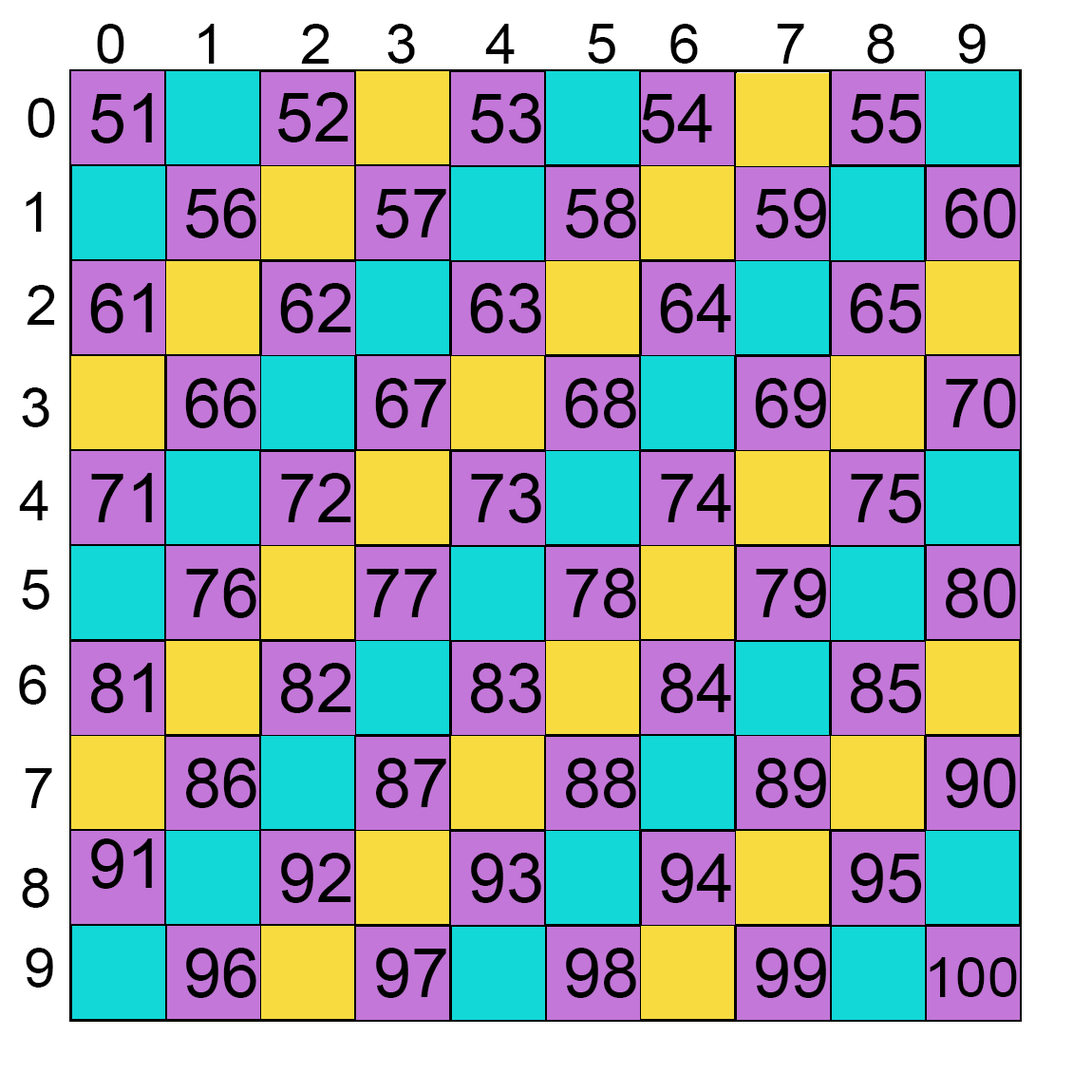
<style>
.page{position:relative;width:1092px;height:1092px;background:#c377d8}
.page>*{position:absolute;margin:0}
.t1{font:57px "ArialMT";color:#000000}
.t2{font:68.4px "ArialMT";color:#000000}
</style>
<div class="page">
<p class="t1" style="left:97px;top:24px;width:27px;height:40px">0</p>
<p class="t1" style="left:198px;top:24px;width:17px;height:40px">1</p>
<p class="t1" style="left:301px;top:24px;width:28px;height:40px">2</p>
<p class="t1" style="left:387px;top:24px;width:28px;height:40px">3</p>
<p class="t1" style="left:485px;top:24px;width:30px;height:40px">4</p>
<p class="t1" style="left:588px;top:24px;width:27px;height:40px">5</p>
<p class="t1" style="left:670px;top:24px;width:28px;height:40px">6</p>
<p class="t1" style="left:777px;top:24px;width:27px;height:40px">7</p>
<p class="t1" style="left:867px;top:24px;width:27px;height:40px">8</p>
<p class="t1" style="left:958px;top:24px;width:28px;height:40px">9</p>
<p class="t1" style="left:28px;top:98px;width:27px;height:40px">0</p>
<p class="t2" style="left:91px;top:93px;width:61px;height:50px">51</p>
<p class="t2" style="left:278px;top:92px;width:70px;height:50px">52</p>
<p class="t2" style="left:471px;top:93px;width:70px;height:50px">53</p>
<p class="t2" style="left:642px;top:94px;width:70px;height:49px">54</p>
<p class="t2" style="left:851px;top:94px;width:71px;height:49px">55</p>
<p class="t1" style="left:26px;top:192px;width:16px;height:40px">1</p>
<p class="t2" style="left:186px;top:188px;width:70px;height:50px">56</p>
<p class="t2" style="left:376px;top:189px;width:70px;height:49px">57</p>
<p class="t2" style="left:566px;top:188px;width:70px;height:50px">58</p>
<p class="t2" style="left:756px;top:188px;width:70px;height:50px">59</p>
<p class="t2" style="left:945px;top:188px;width:71px;height:50px">60</p>
<p class="t1" style="left:27px;top:285px;width:28px;height:40px">2</p>
<p class="t2" style="left:90px;top:283px;width:62px;height:50px">61</p>
<p class="t2" style="left:280px;top:283px;width:71px;height:50px">62</p>
<p class="t2" style="left:470px;top:283px;width:71px;height:50px">63</p>
<p class="t2" style="left:660px;top:283px;width:71px;height:50px">64</p>
<p class="t2" style="left:850px;top:283px;width:72px;height:50px">65</p>
<p class="t2" style="left:185px;top:378px;width:71px;height:50px">66</p>
<p class="t2" style="left:375px;top:378px;width:71px;height:50px">67</p>
<p class="t2" style="left:565px;top:378px;width:71px;height:50px">68</p>
<p class="t2" style="left:755px;top:378px;width:71px;height:50px">69</p>
<p class="t2" style="left:946px;top:378px;width:70px;height:50px">70</p>
<p class="t1" style="left:22px;top:387px;width:27px;height:40px">3</p>
<p class="t2" style="left:91px;top:473px;width:61px;height:49px">71</p>
<p class="t2" style="left:281px;top:473px;width:70px;height:49px">72</p>
<p class="t2" style="left:471px;top:473px;width:70px;height:50px">73</p>
<p class="t2" style="left:661px;top:474px;width:70px;height:48px">74</p>
<p class="t2" style="left:851px;top:474px;width:71px;height:49px">75</p>
<p class="t1" style="left:19px;top:480px;width:29px;height:40px">4</p>
<p class="t1" style="left:22px;top:570px;width:27px;height:40px">5</p>
<p class="t2" style="left:186px;top:568px;width:70px;height:50px">76</p>
<p class="t2" style="left:367px;top:569px;width:70px;height:48px">77</p>
<p class="t2" style="left:566px;top:568px;width:70px;height:50px">78</p>
<p class="t2" style="left:756px;top:568px;width:70px;height:50px">79</p>
<p class="t2" style="left:946px;top:568px;width:70px;height:50px">80</p>
<p class="t1" style="left:19px;top:665px;width:28px;height:40px">6</p>
<p class="t2" style="left:91px;top:663px;width:61px;height:50px">81</p>
<p class="t2" style="left:281px;top:663px;width:70px;height:50px">82</p>
<p class="t2" style="left:471px;top:663px;width:70px;height:50px">83</p>
<p class="t2" style="left:661px;top:663px;width:70px;height:50px">84</p>
<p class="t2" style="left:851px;top:663px;width:71px;height:50px">85</p>
<p class="t2" style="left:186px;top:758px;width:70px;height:50px">86</p>
<p class="t2" style="left:376px;top:758px;width:70px;height:50px">87</p>
<p class="t2" style="left:566px;top:758px;width:70px;height:50px">88</p>
<p class="t2" style="left:756px;top:758px;width:70px;height:50px">89</p>
<p class="t2" style="left:946px;top:758px;width:70px;height:50px">90</p>
<p class="t1" style="left:25px;top:768px;width:27px;height:40px">7</p>
<p class="t2" style="left:91px;top:838px;width:61px;height:51px">91</p>
<p class="t2" style="left:281px;top:853px;width:70px;height:50px">92</p>
<p class="t2" style="left:471px;top:853px;width:70px;height:50px">93</p>
<p class="t2" style="left:661px;top:853px;width:70px;height:50px">94</p>
<p class="t2" style="left:851px;top:853px;width:71px;height:50px">95</p>
<p class="t1" style="left:22px;top:868px;width:27px;height:40px">8</p>
<p class="t1" style="left:26px;top:948px;width:27px;height:40px">9</p>
<p class="t2" style="left:186px;top:948px;width:70px;height:50px">96</p>
<p class="t2" style="left:376px;top:948px;width:70px;height:50px">97</p>
<p class="t2" style="left:566px;top:948px;width:70px;height:50px">98</p>
<p class="t2" style="left:756px;top:948px;width:70px;height:50px">99</p>
<p class="t1" style="left:930px;top:957px;width:87px;height:40px">100</p>
</div>
